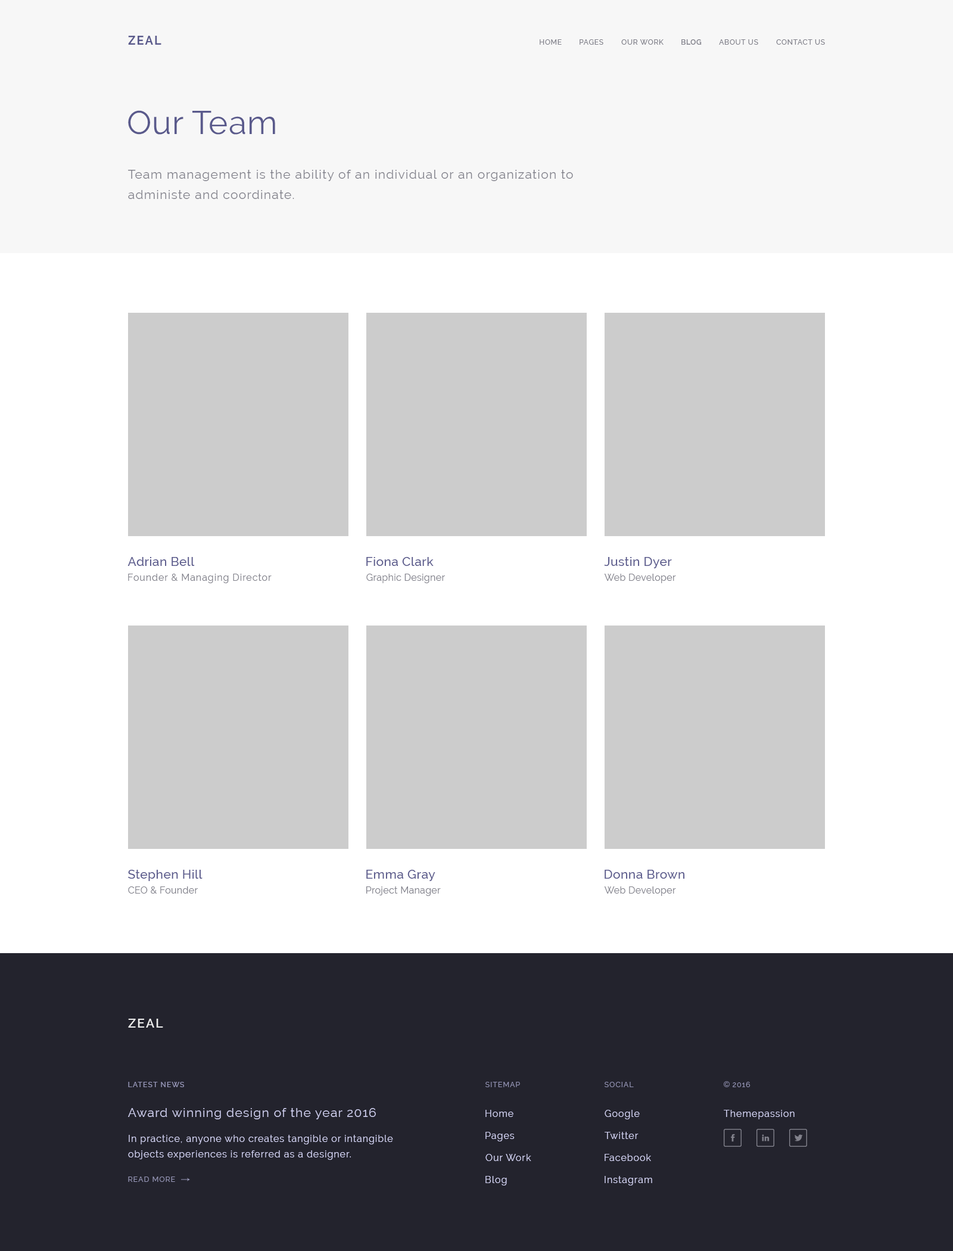
<style>
.page{position:relative;width:953px;height:1251px;background:#ffffff}
.page>*{position:absolute;margin:0}
.t1{font:11.9px "Raleway-Bold";letter-spacing:0.1em;color:#5a5a8c}
.t2{font:7.1px "Raleway-Medium";letter-spacing:0.06em;color:#82828c}
.t3{font:7.1px "Raleway-SemiBold";letter-spacing:0.06em;color:#82828c}
.t4{font:32.8px "Raleway-Regular";letter-spacing:0.02em;color:#5a5a8c}
.t5{font:12.5px/20.3px "Raleway-Regular";letter-spacing:0.06em;color:#82828c}
.t6{font:12.5px "Raleway-Medium";letter-spacing:0.02em;color:#5a5a8c}
.t7{font:9.5px "Raleway-Regular";letter-spacing:0.06em;color:#82828c}
.t8{font:9.5px "Raleway-Regular";letter-spacing:0.02em;color:#82828c}
.t9{font:12.5px "Raleway-SemiBold";letter-spacing:0.1em;color:#eeeeee}
.t10{font:7.1px "Raleway-Medium";letter-spacing:0.1em;color:#9797b8}
.t11{font:7.1px "Raleway-Regular";letter-spacing:0.1em;color:#9797b8}
.t12{font:12.5px "Raleway-Regular";letter-spacing:0.06em;color:#d0d0f0}
.t13{font:9.5px "Raleway-Regular";letter-spacing:0.06em;color:#d0d0f0}
.t14{font:9.5px/15.5px "Raleway-Regular";letter-spacing:0.06em;color:#d0d0f0}
</style>
<div class="page">
<p class="t1" style="left:128px;top:36px;width:33px;height:9px">ZEAL</p>
<p class="t2" style="left:540px;top:39px;width:22px;height:6px">HOME</p>
<p class="t2" style="left:580px;top:39px;width:23px;height:6px">PAGES</p>
<p class="t2" style="left:621px;top:39px;width:43px;height:6px">OUR WORK</p>
<p class="t3" style="left:682px;top:39px;width:20px;height:6px">BLOG</p>
<p class="t2" style="left:719px;top:39px;width:39px;height:6px">ABOUT US</p>
<p class="t2" style="left:776px;top:39px;width:49px;height:6px">CONTACT US</p>
<p class="t4" style="left:128px;top:110px;width:147px;height:25px">Our Team</p>
<p class="t5" style="left:128px;top:170px;width:445px;height:29px;text-align:right">Team management is the ability of an individual or an organization to<br>administe and coordinate.</p>
<p class="t6" style="left:127px;top:557px;width:68px;height:9px">Adrian Bell</p>
<p class="t6" style="left:366px;top:557px;width:68px;height:9px">Fiona Clark</p>
<p class="t6" style="left:604px;top:557px;width:68px;height:11px">Justin Dyer</p>
<p class="t7" style="left:128px;top:574px;width:144px;height:9px">Founder &amp; Managing Director</p>
<p class="t8" style="left:366px;top:574px;width:79px;height:9px">Graphic Designer</p>
<p class="t8" style="left:604px;top:574px;width:72px;height:9px">Web Developer</p>
<p class="t6" style="left:128px;top:870px;width:75px;height:11px">Stephen Hill</p>
<p class="t6" style="left:366px;top:870px;width:69px;height:11px">Emma Gray</p>
<p class="t6" style="left:605px;top:870px;width:80px;height:9px">Donna Brown</p>
<p class="t8" style="left:128px;top:886px;width:70px;height:8px">CEO &amp; Founder</p>
<p class="t8" style="left:366px;top:886px;width:75px;height:10px">Project Manager</p>
<p class="t8" style="left:604px;top:886px;width:72px;height:10px">Web Developer</p>
<p class="t9" style="left:128px;top:1019px;width:35px;height:9px">ZEAL</p>
<p class="t10" style="left:128px;top:1082px;width:56px;height:5px">LATEST NEWS</p>
<p class="t11" style="left:486px;top:1082px;width:34px;height:5px">SITEMAP</p>
<p class="t11" style="left:605px;top:1082px;width:29px;height:5px">SOCIAL</p>
<p class="t11" style="left:733px;top:1082px;width:18px;height:5px">2016</p>
<p class="t12" style="left:128px;top:1108px;width:248px;height:11px">Award winning design of the year 2016</p>
<p class="t13" style="left:486px;top:1110px;width:28px;height:7px">Home</p>
<p class="t13" style="left:605px;top:1110px;width:35px;height:9px">Google</p>
<p class="t13" style="left:724px;top:1110px;width:71px;height:9px">Themepassion</p>
<p class="t13" style="left:486px;top:1132px;width:29px;height:9px">Pages</p>
<p class="t13" style="left:605px;top:1132px;width:34px;height:7px">Twitter</p>
<p class="t14" style="left:128px;top:1135px;width:265px;height:25px;text-align:right">In practice, anyone who creates tangible or intangible<br>objects experiences is referred as a designer.</p>
<p class="t13" style="left:486px;top:1154px;width:45px;height:7px">Our Work</p>
<p class="t13" style="left:605px;top:1154px;width:46px;height:7px">Facebook</p>
<p class="t11" style="left:128px;top:1177px;width:47px;height:5px">READ MORE</p>
<p class="t13" style="left:486px;top:1176px;width:21px;height:9px">Blog</p>
<p class="t13" style="left:605px;top:1176px;width:47px;height:9px">Instagram</p>
</div>
